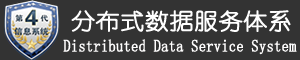
<style>
.page{position:relative;width:300px;height:60px;background:#333333}
.page>*{position:absolute;margin:0}
.t1{font:22.4px "YouYuan";color:#ffffff;font-weight:bold;scale:1.07 1}
.t2{font:17px "YouYuan";color:#fffefe;font-weight:bold;scale:0.84 1}
</style>
<div class="page">
<p class="t1" style="left:71px;top:10px;width:220px;height:22px">分布式数据服务体系</p>
<p class="t2" style="left:63px;top:39px;width:234px;height:16px">Distributed Data Service System</p>
</div>
